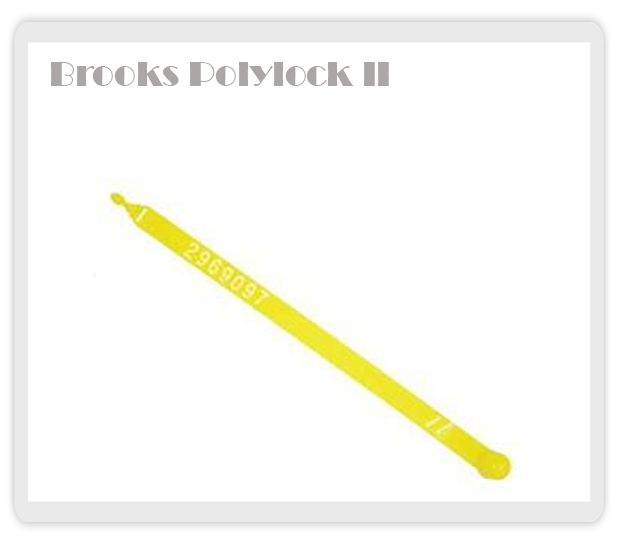
<style>
.page{position:relative;width:618px;height:544px;background:#ffffff}
.page>*{position:absolute;margin:0}
.t1{font:36px "Broadway";color:#aca7a7}
</style>
<div class="page">
<p class="t1" style="left:51px;top:62px;width:338px;height:24px">Brooks Polylock II</p>
</div>
